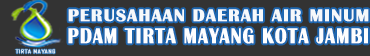
<style>
.page{position:relative;width:370px;height:56px;background:#333333}
.page>*{position:absolute;margin:0}
.t1{font:17.5px "BritannicBold";letter-spacing:0.05em;color:#f6f9fb;font-weight:bold}
.t2{font:22.2px "BritannicBold";letter-spacing:0.05em;color:#fdfeff;font-weight:bold;scale:0.81 1}
.t3{font:4.6px "AgencyFB-Reg";letter-spacing:0.05em;color:#f6f9fb;font-weight:bold;scale:1.61 1}
</style>
<div class="page">
<p class="t1" style="left:68px;top:9px;width:301px;height:13px">PERUSAHAAN DAERAH AIR MINUM</p>
<p class="t2" style="left:68px;top:28px;width:300px;height:16px">PDAM TIRTA MAYANG KOTA JAMBI</p>
<p class="t3" style="left:15px;top:49px;width:40px;height:5px">TIRTA MAYANG</p>
</div>
